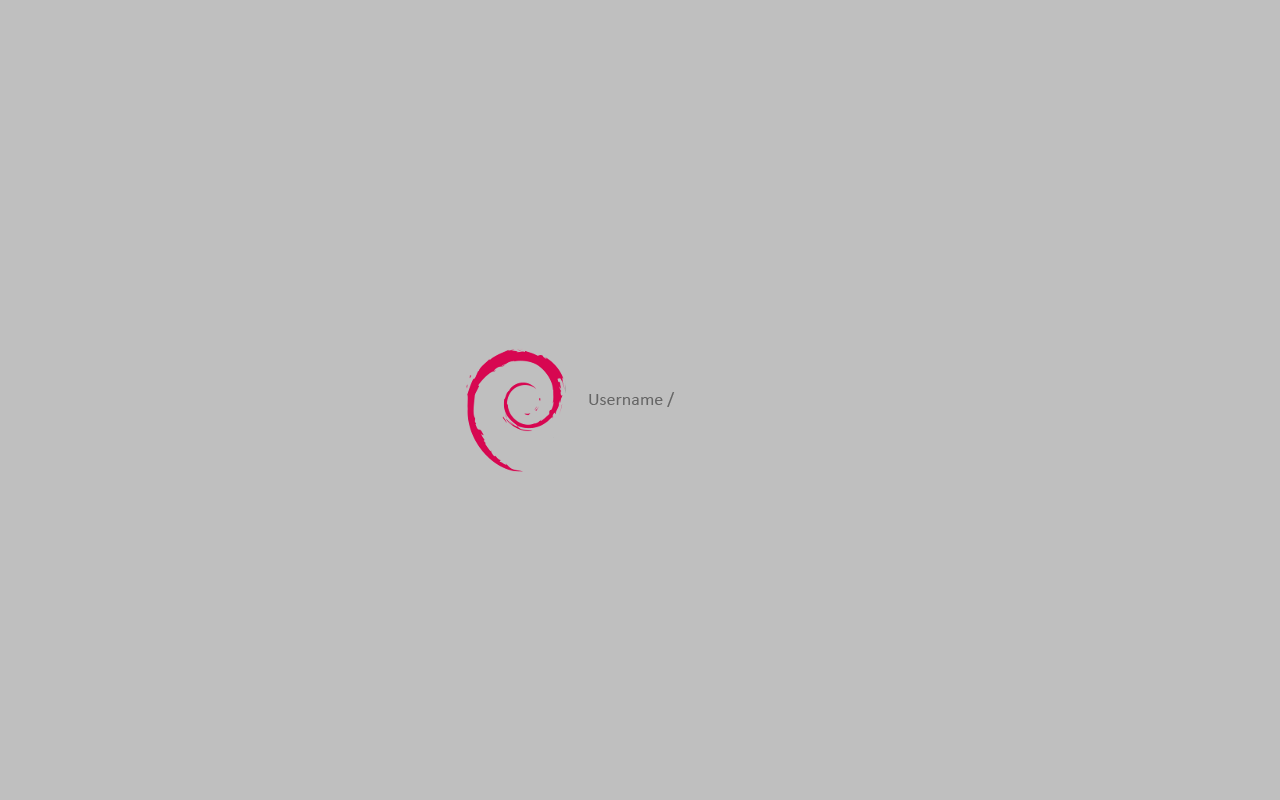
<style>
.page{position:relative;width:1280px;height:800px;background:#bfbfbf}
.page>*{position:absolute;margin:0}
.t1{font:18px "Calibri";color:#666666}
</style>
<div class="page">
<p class="t1" style="left:589px;top:392px;width:86px;height:15px">Username /</p>
</div>
